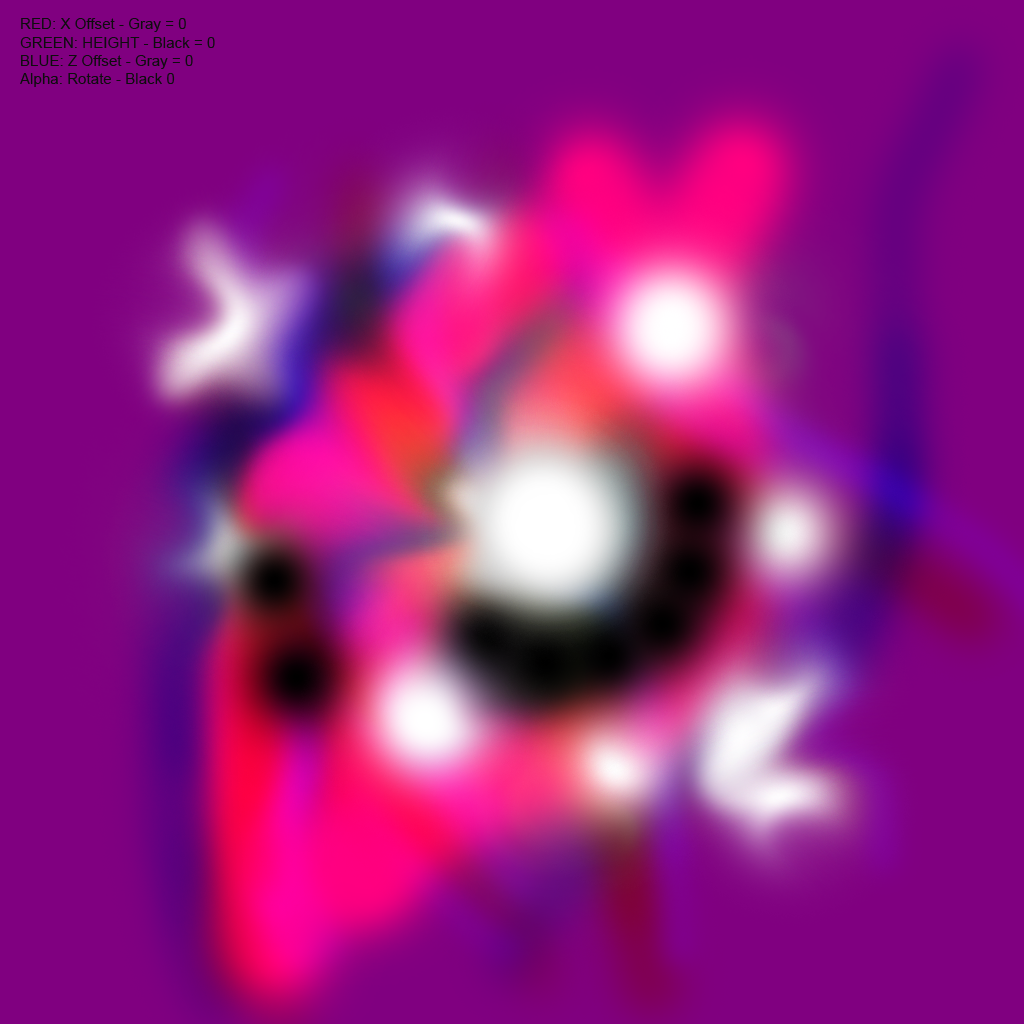
<style>
.page{position:relative;width:1024px;height:1024px;background:#800080}
.page>*{position:absolute;margin:0}
.t1{font:15.1px "ArialMT";color:#0d0d0d}
</style>
<div class="page">
<p class="t1" style="left:20px;top:18px;width:195px;height:69px">RED: X Offset - Gray = 0<br>GREEN: HEIGHT - Black = 0<br>BLUE: Z Offset - Gray = 0<br>Alpha: Rotate - Black 0</p>
</div>
